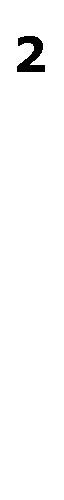
<style>
.page{position:relative;width:64px;height:500px;background:#ffffff}
.page>*{position:absolute;margin:0}
.t1{font:48px "Verdana-Bold";color:#000000}
</style>
<div class="page">
<p class="t1" style="left:17px;top:36px;width:28px;height:36px">2</p>
</div>
